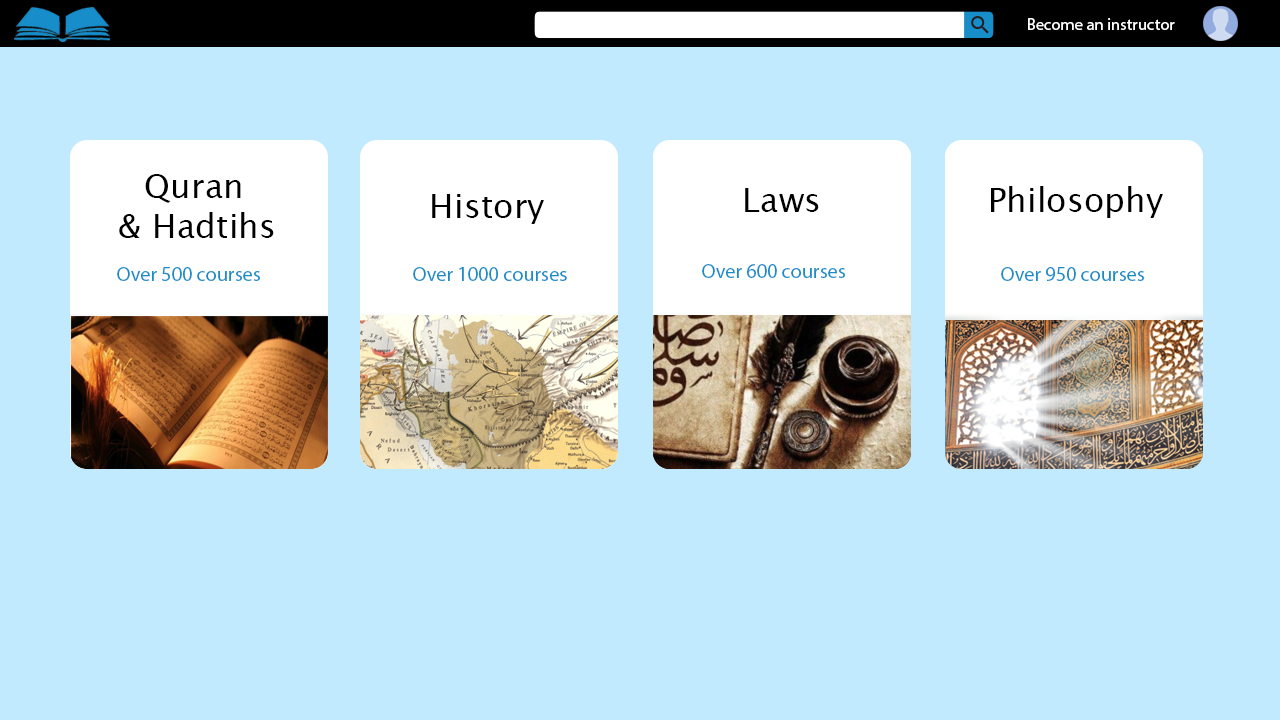
<style>
.page{position:relative;width:1280px;height:720px;background:#c1eaff}
.page>*{position:absolute;margin:0}
.t1{font:12px "MyriadPro-Regular";color:#ffffff}
.t2{font:33.3px "LucidaGrande";color:#000000}
.t3{font:14.6px "MyriadPro-Regular";color:#178dca}
</style>
<div class="page">
<p class="t1" style="left:1028px;top:18px;width:147px;height:12px">Become an instructor</p>
<p class="t2" style="left:119px;top:174px;width:155px;height:64px">Quran<br>          &amp; Hadtihs</p>
<p class="t2" style="left:432px;top:194px;width:112px;height:30px">History</p>
<p class="t2" style="left:745px;top:188px;width:74px;height:24px">Laws</p>
<p class="t2" style="left:991px;top:186px;width:172px;height:32px">Philosophy</p>
<p class="t3" style="left:117px;top:267px;width:143px;height:14px">Over 500 courses</p>
<p class="t3" style="left:413px;top:267px;width:154px;height:14px">Over 1000 courses</p>
<p class="t3" style="left:702px;top:264px;width:143px;height:14px">Over 600 courses</p>
<p class="t3" style="left:1001px;top:267px;width:143px;height:14px">Over 950 courses</p>
</div>
